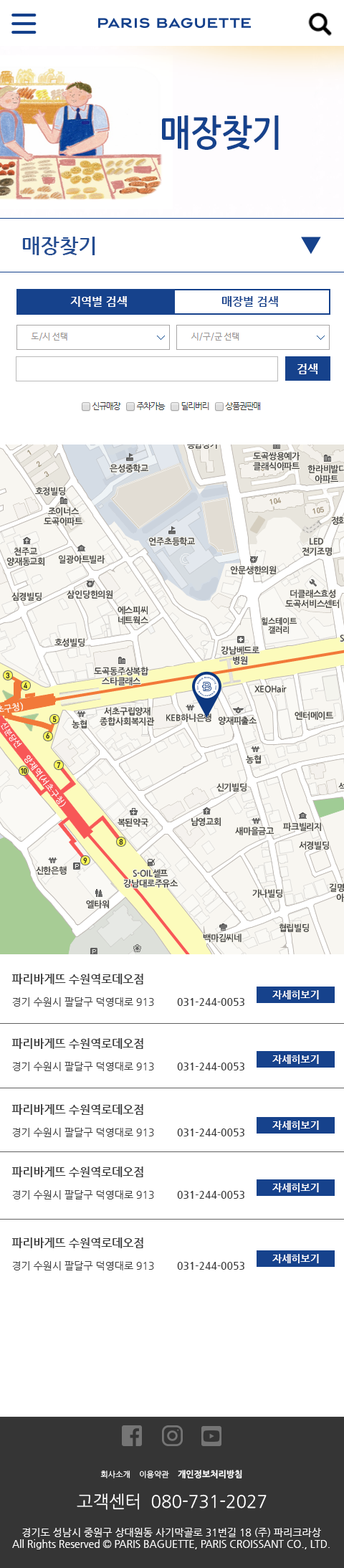
<style>
.page{position:relative;width:344px;height:1568px;background:#ffffff}
.page>*{position:absolute;margin:0}
.t1{font:36.3px "NanumGothicBold";color:#16428c;scale:0.9 1}
.t2{font:20.1px "NanumGothicBold";color:#244d92}
.t3{font:11.5px "NanumGothicBold";color:#ffffff}
.t4{font:11.5px "NanumGothicBold";color:#16428c}
.t5{font:11.5px "NanumGothicBold";color:#3b3b3b}
.t6{font:10px "NanumGothic";color:#3b3b3b}
.t7{font:10px "NanumGothicBold";color:#3b3b3b}
.t8{font:10px "NanumGothicBold";color:#ffffff}
.t9{font:7.8px "NanumGothic";color:#ffffff}
.t10{font:8.5px "NanumGothicBold";color:#ffffff}
.t11{font:17.2px "NanumGothic";color:#ffffff}
.t12{font:10px/11.5px "NanumGothic";color:#ffffff}
</style>
<div class="page">
<p class="t1" style="left:162px;top:115px;width:117px;height:35px">매장찾기</p>
<p class="t2" style="left:22px;top:237px;width:73px;height:18px">매장찾기</p>
<p class="t3" style="left:70px;top:296px;width:57px;height:11px">지역별 검색</p>
<p class="t4" style="left:222px;top:296px;width:56px;height:11px">매장별 검색</p>
<p class="t3" style="left:298px;top:364px;width:20px;height:10px">검색</p>
<p class="t5" style="left:11px;top:974px;width:132px;height:10px">파리바게뜨 수원역로데오점</p>
<p class="t6" style="left:12px;top:997px;width:142px;height:10px">경기 수원시 팔달구 덕영대로 913</p>
<p class="t7" style="left:177px;top:998px;width:67px;height:8px">031-244-0053</p>
<p class="t8" style="left:272px;top:990px;width:47px;height:9px">자세히보기</p>
<p class="t5" style="left:11px;top:1038px;width:132px;height:11px">파리바게뜨 수원역로데오점</p>
<p class="t6" style="left:12px;top:1062px;width:142px;height:9px">경기 수원시 팔달구 덕영대로 913</p>
<p class="t8" style="left:272px;top:1055px;width:47px;height:9px">자세히보기</p>
<p class="t7" style="left:177px;top:1063px;width:67px;height:7px">031-244-0053</p>
<p class="t5" style="left:11px;top:1104px;width:132px;height:11px">파리바게뜨 수원역로데오점</p>
<p class="t8" style="left:272px;top:1121px;width:47px;height:9px">자세히보기</p>
<p class="t6" style="left:12px;top:1128px;width:142px;height:9px">경기 수원시 팔달구 덕영대로 913</p>
<p class="t7" style="left:177px;top:1129px;width:67px;height:7px">031-244-0053</p>
<p class="t5" style="left:11px;top:1167px;width:132px;height:10px">파리바게뜨 수원역로데오점</p>
<p class="t6" style="left:12px;top:1190px;width:142px;height:9px">경기 수원시 팔달구 덕영대로 913</p>
<p class="t7" style="left:177px;top:1191px;width:67px;height:8px">031-244-0053</p>
<p class="t8" style="left:272px;top:1183px;width:47px;height:9px">자세히보기</p>
<p class="t5" style="left:11px;top:1237px;width:132px;height:11px">파리바게뜨 수원역로데오점</p>
<p class="t8" style="left:272px;top:1254px;width:47px;height:9px">자세히보기</p>
<p class="t6" style="left:12px;top:1261px;width:142px;height:9px">경기 수원시 팔달구 덕영대로 913</p>
<p class="t7" style="left:177px;top:1262px;width:67px;height:8px">031-244-0053</p>
<p class="t9" style="left:100px;top:1470px;width:142px;height:9px">회사소개    이용약관    <span class="t10">개인정보처리방침</span></p>
<p class="t11" style="left:77px;top:1493px;width:190px;height:17px">고객센터  080-731-2027</p>
<p class="t12" style="left:12px;top:1527px;width:318px;height:22px;text-align:center">경기도 성남시 중원구 상대원동 사기막골로 31번길 18 (주) 파리크라상<br>All Rights Reserved © PARIS BAGUETTE, PARIS CROISSANT CO., LTD.</p>
</div>
